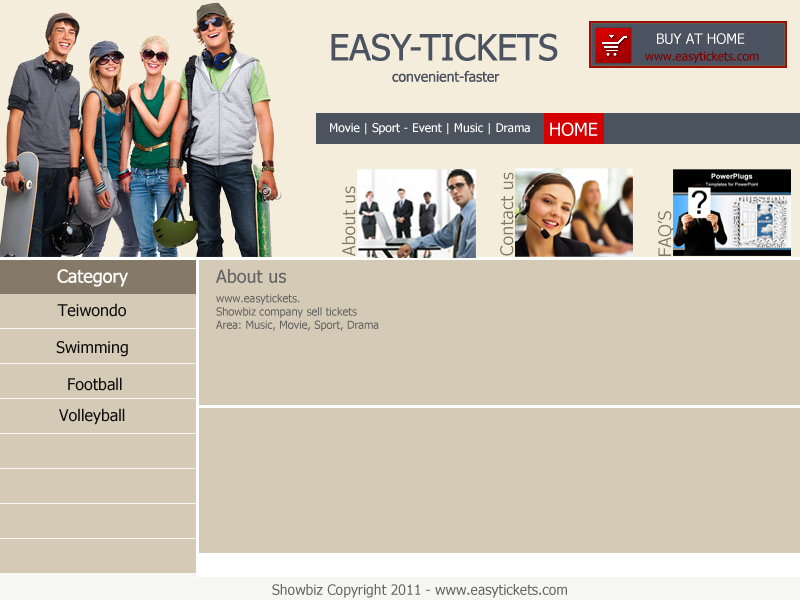
<style>
.page{position:relative;width:800px;height:600px;background:#d5cab6}
.page>*{position:absolute;margin:0}
.t1{font:36px "Tahoma";color:#4b5360}
.t2{font:14px "Tahoma";color:#ffffff}
.t3{font:12px "Tahoma";color:#770404}
.t4{font:14px "Tahoma";color:#4b5360}
.t5{font:12px "Tahoma";color:#ffffff}
.t6{font:18px "Tahoma";color:#ffffff}
.t7{font:18px "Tahoma";color:#636363}
.t8{font:11px "Tahoma";color:#636363}
.t9{font:16px "Tahoma";color:#0d0d0d}
.t10{font:14px "Tahoma";color:#636363}
</style>
<div class="page">
<p class="t1" style="left:331px;top:33px;width:227px;height:28px">EASY-TICKETS</p>
<p class="t2" style="left:657px;top:33px;width:88px;height:11px">BUY AT HOME</p>
<p class="t3" style="left:645px;top:51px;width:114px;height:12px">www.easytickets.com</p>
<p class="t4" style="left:392px;top:70px;width:108px;height:12px">convenient-faster</p>
<p class="t5" style="left:330px;top:123px;width:200px;height:12px">Movie | Sport - Event | Music | Drama</p>
<p class="t6" style="left:550px;top:122px;width:48px;height:14px">HOME</p>
<p class="t6" style="left:57px;top:269px;width:71px;height:18px">Category</p>
<p class="t7" style="left:216px;top:269px;width:70px;height:14px">About us</p>
<p class="t8" style="left:216px;top:294px;width:163px;height:37px">www.easytickets.<br>Showbiz company sell tickets<br>Area: Music, Movie, Sport, Drama</p>
<p class="t9" style="left:57px;top:303px;width:69px;height:14px">Teiwondo</p>
<p class="t9" style="left:56px;top:341px;width:72px;height:16px">Swimming</p>
<p class="t9" style="left:68px;top:377px;width:54px;height:14px">Football</p>
<p class="t9" style="left:59px;top:408px;width:66px;height:17px">Volleyball</p>
<p class="t10" style="left:272px;top:584px;width:295px;height:14px">Showbiz Copyright 2011 - www.easytickets.com</p>
</div>
